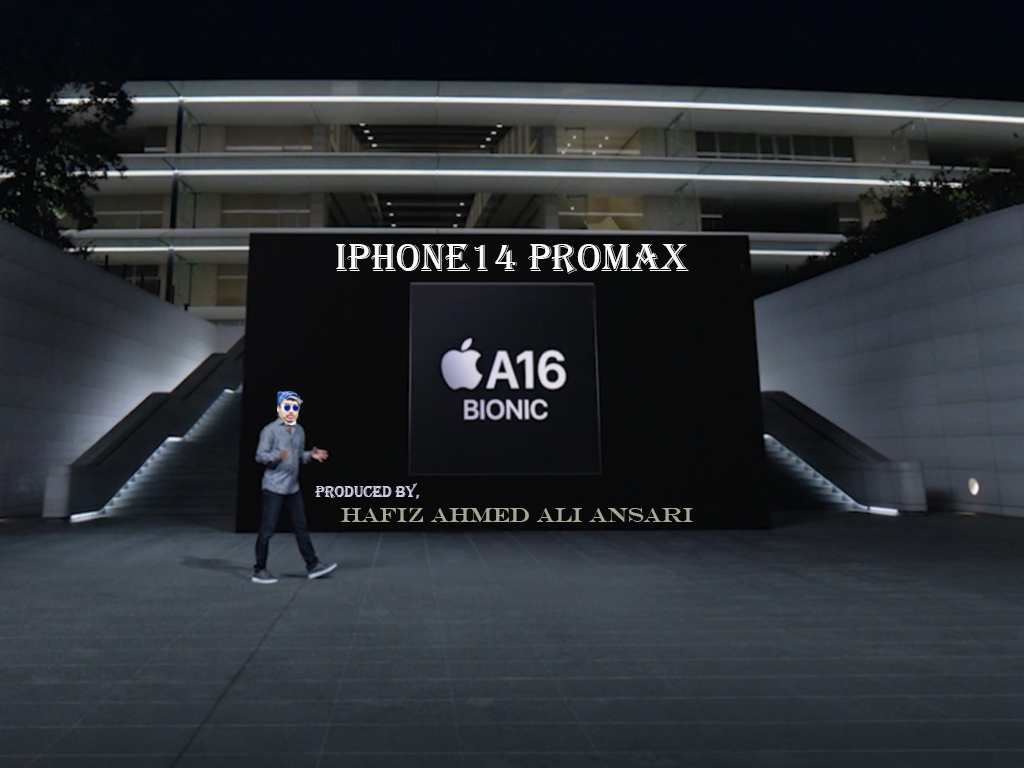
<style>
.page{position:relative;width:1024px;height:768px}
.page>*{position:absolute;margin:0}
.t1{font:40px "Algerian";color:#fbfbfb}
.t2{font:15.7px "Algerian";color:#d3cee3}
.t3{font:20.6px "EngraversMT";color:#a8a696}
</style>
<div class="page">
<p class="t1" style="left:336px;top:244px;width:353px;height:30px">IPHONE14 PROMAX</p>
<p class="t2" style="left:315px;top:483px;width:105px;height:16px">PRODUCED BY,</p>
<p class="t3" style="left:341px;top:508px;width:352px;height:14px">hAFIZ AHMED alI aNSARI</p>
</div>
